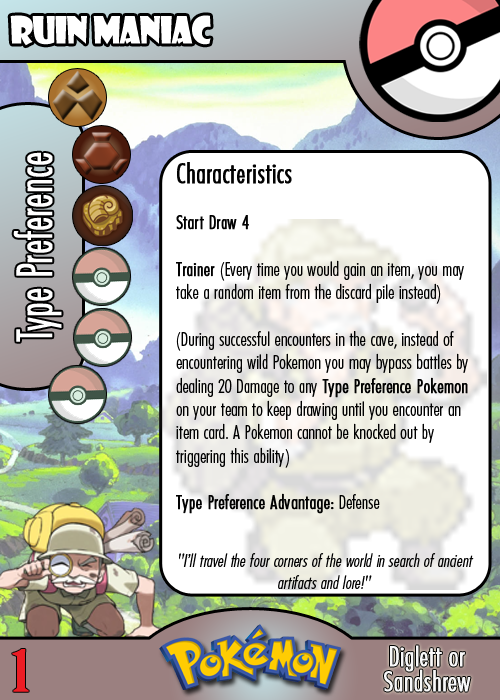
<style>
.page{position:relative;width:500px;height:700px}
.page>*{position:absolute;margin:0}
.t1{font:36.7px "ShowcardGothic-Reg";letter-spacing:-0.025em;color:#ffffff;scale:0.91 1}
.t2{font:46.7px "Futura-CondensedLight";color:#ffffff;font-weight:bold;scale:0.83 1}
.t3{font:19.4px "FuturaCondensedBQ-Light";color:#010101}
.t4{font:27.8px "FuturaCondensedBQ-Light";color:#010101;font-weight:bold}
.t5{font:19.4px "FuturaCondensedBQ-Light";color:#010101;font-weight:bold}
.t6{font:18.1px "FuturaCondensedBQ-Light";color:#010101;font-style:italic}
.t7{font:55.6px "BirchStd";color:#ed1c24;font-weight:bold;scale:1.5 1}
.t8{font:27.8px "FuturaCondensedBQ-Light";color:#f9f9f9;font-weight:bold}
</style>
<div class="page">
<p class="t1" style="left:10px;top:15px;width:201px;height:31px">Ruin Maniac</p>
<p class="t2" style="left:13px;top:152px;width:49px;height:190px;rotate:-90deg">Type Preference</p>
<p class="t3" style="left:176px;top:162px;width:292px;height:352px"><span class="t4">Characteristics<br></span><span class="t5"><br>Start Draw 4<br><br>Trainer </span>(Every time you would gain an item, you may take a random item from the discard pile instead)<br><br>(During successful encounters in the cave, instead of encountering wild Pokemon you may bypass battles by dealing 20 Damage to any <span class="t5">Type Preference Pokemon</span> on your team to keep drawing until you encounter an item card. A Pokemon cannot be knocked out by triggering this ability)<br><br><span class="t5">Type Preference Advantage:</span> Defense</p>
<p class="t6" style="left:179px;top:553px;width:295px;height:36px;text-align:center">"I’ll travel the four corners of the world in search of ancient artifacts and lore!"</p>
<p class="t7" style="left:12px;top:649px;width:17px;height:43px">1</p>
<p class="t8" style="left:390px;top:645px;width:75px;height:27px">Diglett or</p>
<p class="t8" style="left:384px;top:669px;width:87px;height:23px">Sandshrew</p>
</div>
